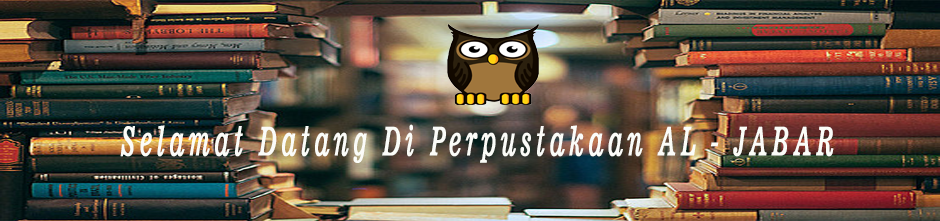
<style>
.page{position:relative;width:940px;height:221px}
.page>*{position:absolute;margin:0}
.t1{font:39.2px "News701BT-ItalicA";letter-spacing:0.18em;color:#fbfcf8;font-weight:bold;scale:0.57 1}
</style>
<div class="page">
<p class="t1" style="left:120px;top:124px;width:714px;height:39px">Selamat Datang Di Perpustakaan AL - JABAR</p>
</div>
